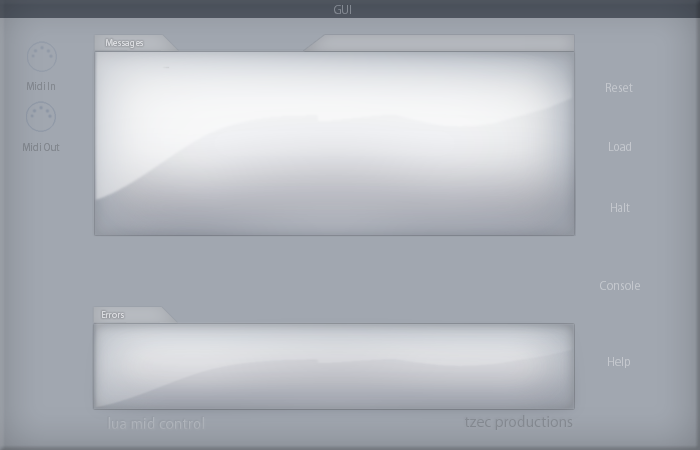
<style>
.page{position:relative;width:700px;height:450px;background:#a1a7b0}
.page>*{position:absolute;margin:0}
.t1{font:12.6px "Myriad-Roman";color:#838992;scale:0.96 1}
.t2{font:9.9px "Myriad-Roman";color:#d9dbdf;scale:0.96 1}
.t3{font:10.8px "Myriad-Roman";color:#83888f;scale:0.96 1}
.t4{font:12.6px "Myriad-Roman";color:#c4c7cd;scale:0.96 1}
.t5{font:10.8px "Myriad-Roman";color:#82878e;scale:0.96 1}
.t6{font:16.2px "Myriad-Roman";color:#aeb3ba;scale:0.96 1}
.t7{font:16.2px "Myriad-Roman";color:#838890;scale:0.96 1}
</style>
<div class="page">
<p class="t1" style="left:334px;top:5px;width:17px;height:9px">GUI</p>
<p class="t2" style="left:106px;top:39px;width:37px;height:9px">Messages</p>
<p class="t3" style="left:27px;top:82px;width:28px;height:8px">Midi In</p>
<p class="t4" style="left:606px;top:83px;width:27px;height:9px">Reset</p>
<p class="t5" style="left:23px;top:143px;width:37px;height:8px">Midi Out</p>
<p class="t4" style="left:609px;top:142px;width:22px;height:9px">Load</p>
<p class="t4" style="left:611px;top:203px;width:19px;height:9px">Halt</p>
<p class="t4" style="left:600px;top:281px;width:40px;height:9px">Console</p>
<p class="t2" style="left:102px;top:311px;width:22px;height:7px">Errors</p>
<p class="t4" style="left:608px;top:357px;width:22px;height:11px">Help</p>
<p class="t6" style="left:108px;top:417px;width:96px;height:12px">lua mid control</p>
<p class="t7" style="left:465px;top:415px;width:108px;height:15px">tzec productions</p>
</div>
